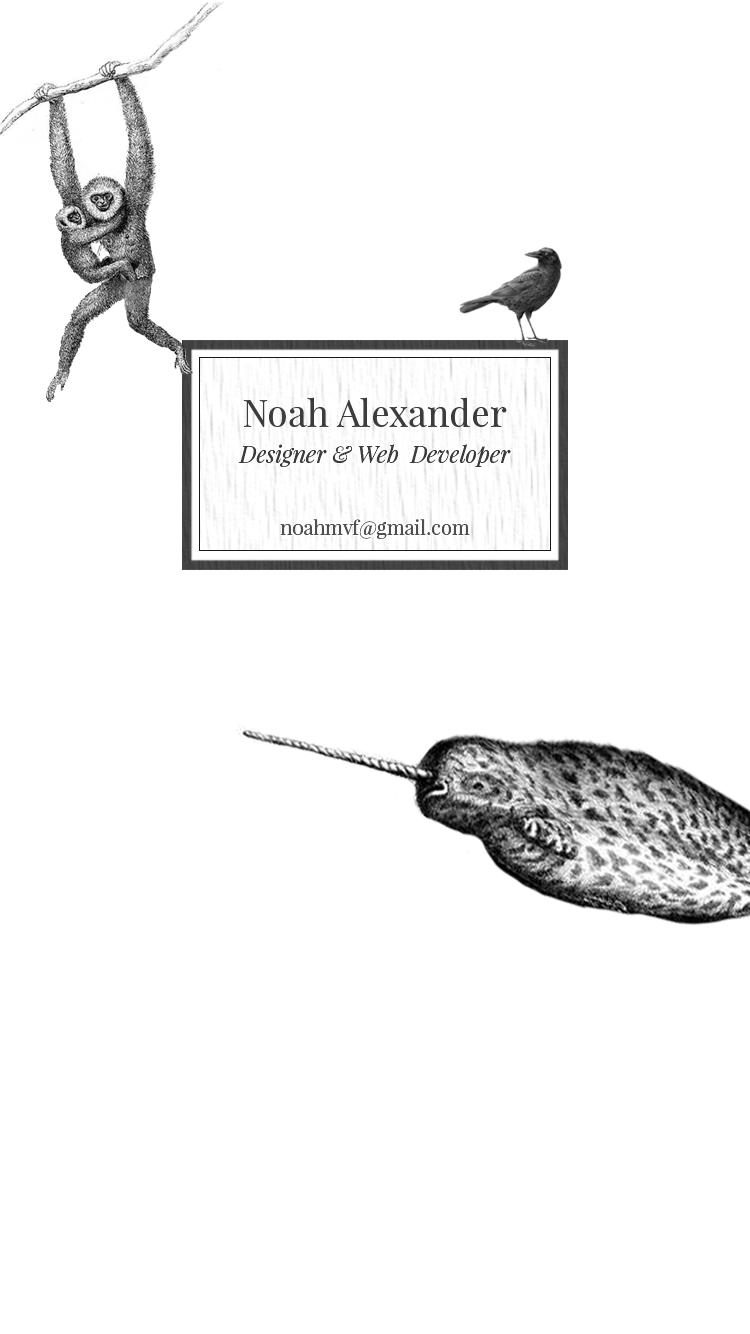
<style>
.page{position:relative;width:750px;height:1334px;background:#ffffff}
.page>*{position:absolute;margin:0}
.t1{font:37.4px "PlayfairDisplay-Regular";color:#3c3c3c}
.t2{font:23.3px "PlayfairDisplay-Italic";color:#3c3c3c}
.t3{font:20px "PlayfairDisplay-Regular";color:#4f4f4f}
</style>
<div class="page">
<p class="t1" style="left:243px;top:397px;width:264px;height:30px">Noah Alexander</p>
<p class="t2" style="left:238px;top:444px;width:273px;height:23px">Designer &amp; Web  Developer</p>
<p class="t3" style="left:280px;top:519px;width:190px;height:20px">noahmvf@gmail.com</p>
</div>
